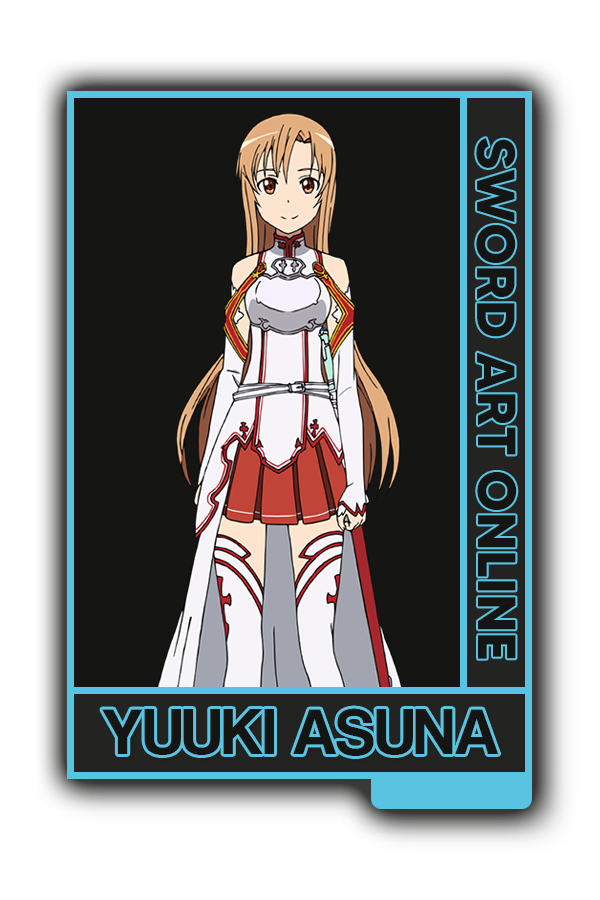
<style>
.page{position:relative;width:600px;height:900px;background:#151514}
.page>*{position:absolute;margin:0}
.t1{font:53.7px "MADETOMMY-Bold";color:#151514}
.t2{font:68px "CoolveticaRg-Regular";color:#151514}
</style>
<div class="page">
<p class="t1" style="left:476px;top:138px;width:41px;height:521px;rotate:90deg">SWORD ART ONLINE</p>
<p class="t2" style="left:102px;top:708px;width:397px;height:48px">YUUKI ASUNA</p>
</div>
